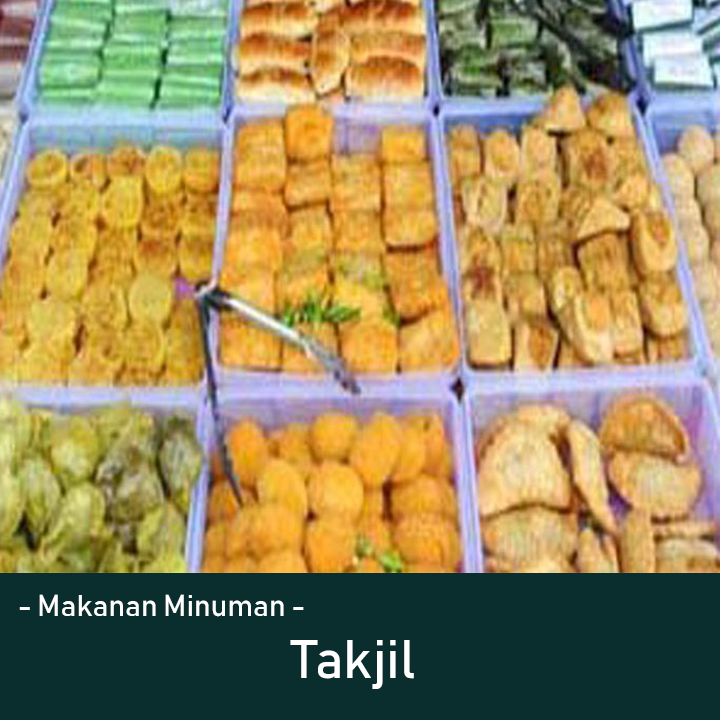
<style>
.page{position:relative;width:720px;height:720px}
.page>*{position:absolute;margin:0}
.t1{font:30px "Bahnschrift";color:#ffffff}
.t2{font:53.6px "Bahnschrift";color:#ffffff}
</style>
<div class="page">
<p class="t1" style="left:19px;top:594px;width:285px;height:23px">- Makanan Minuman -</p>
<p class="t2" style="left:290px;top:640px;width:124px;height:49px">Takjil</p>
</div>
